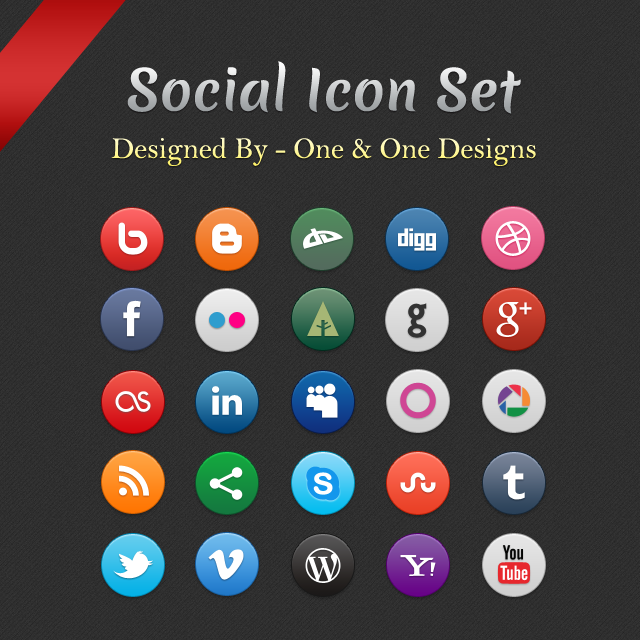
<style>
.page{position:relative;width:640px;height:640px}
.page>*{position:absolute;margin:0}
.t1{font:53px "MeriendaOne-Regular"}
.t2{font:30px "BellMT";color:#fff799}
</style>
<div class="page">
<p class="t1" style="left:127px;top:61px;width:394px;height:53px">Social Icon Set</p>
<p class="t2" style="left:111px;top:137px;width:425px;height:29px">Designed By - One &amp; One Designs</p>
</div>
